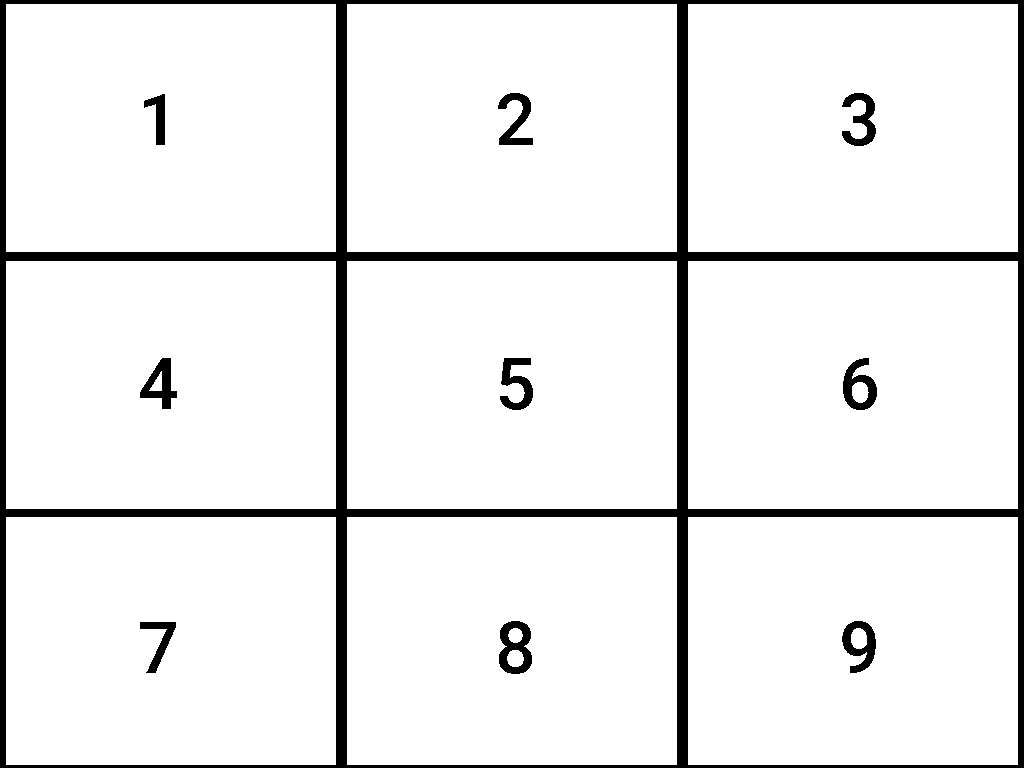
<style>
.page{position:relative;width:1024px;height:768px;background:#ffffff}
.page>*{position:absolute;margin:0}
.t1{font:72px "Roboto-Medium";letter-spacing:0.075em;color:#000000}
</style>
<div class="page">
<p class="t1" style="left:144px;top:94px;width:21px;height:51px">1</p>
<p class="t1" style="left:498px;top:93px;width:35px;height:52px">2</p>
<p class="t1" style="left:842px;top:93px;width:34px;height:53px">3</p>
<p class="t1" style="left:140px;top:358px;width:37px;height:51px">4</p>
<p class="t1" style="left:500px;top:358px;width:33px;height:52px">5</p>
<p class="t1" style="left:843px;top:358px;width:34px;height:52px">6</p>
<p class="t1" style="left:140px;top:622px;width:36px;height:51px">7</p>
<p class="t1" style="left:499px;top:621px;width:33px;height:53px">8</p>
<p class="t1" style="left:842px;top:621px;width:34px;height:52px">9</p>
</div>
